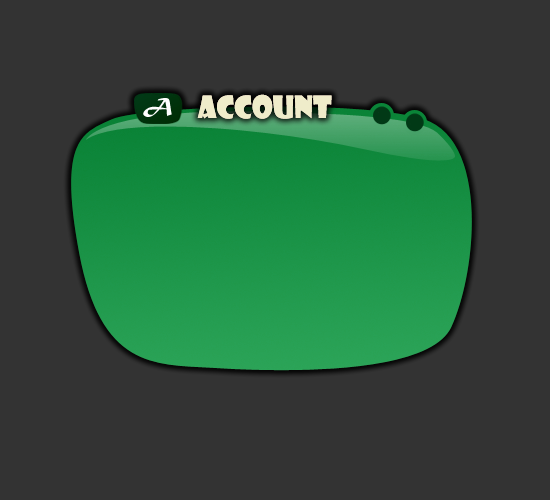
<style>
.page{position:relative;width:550px;height:500px;background:#333333}
.page>*{position:absolute;margin:0}
.t1{font:22.1px "MaturaMTScriptCapitals";color:#ffffff}
.t2{font:30px "ShowcardGothic-Reg";color:#efecca}
</style>
<div class="page">
<p class="t1" style="left:143px;top:98px;width:29px;height:19px">A</p>
<p class="t2" style="left:197px;top:94px;width:135px;height:25px">Account</p>
</div>
